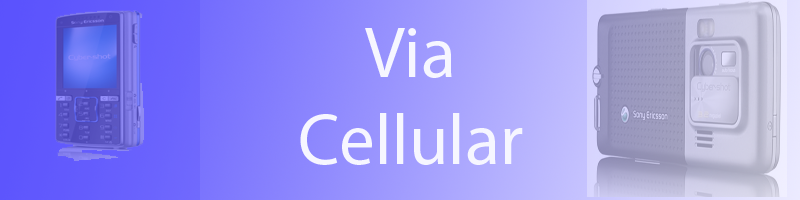
<style>
.page{position:relative;width:800px;height:200px}
.page>*{position:absolute;margin:0}
.t1{font:72px "MyriadPro-Regular";color:#f6f6ff}
</style>
<div class="page">
<p class="t1" style="left:300px;top:28px;width:223px;height:137px;text-align:center">Via<br>Cellular</p>
</div>
